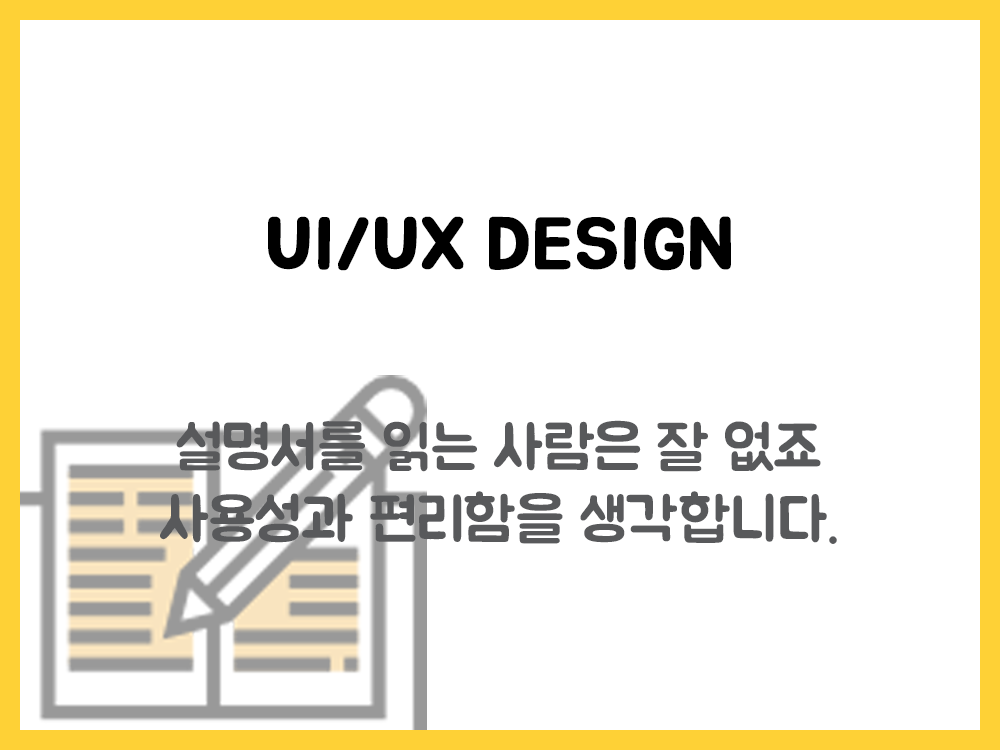
<style>
.page{position:relative;width:1000px;height:750px;background:#ffffff}
.page>*{position:absolute;margin:0}
.t1{font:72px "BMJUA";color:#000000;font-weight:bold}
.t2{font:60px "BMJUA";color:#58595b}
</style>
<div class="page">
<p class="t1" style="left:268px;top:216px;width:463px;height:55px">UI/UX DESIGN</p>
<p class="t2" style="left:160px;top:420px;width:677px;height:124px;text-align:center">설명서를 읽는 사람은 잘 없죠<br>사용성과 편리함을 생각합니다.</p>
</div>
